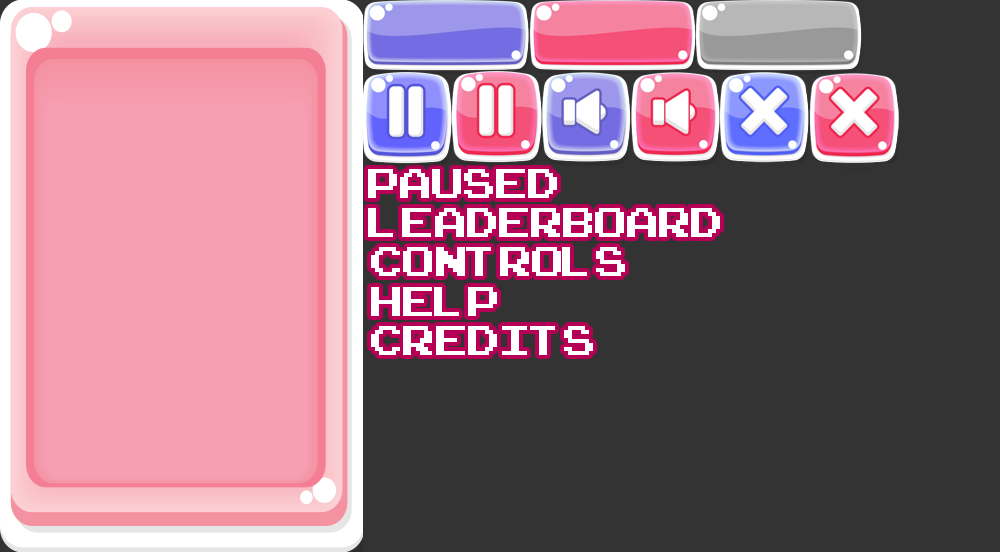
<style>
.page{position:relative;width:1000px;height:552px;background:#333333}
.page>*{position:absolute;margin:0}
.t1{font:58.3px "ArcadeClassic";color:#ffffff}
</style>
<div class="page">
<p class="t1" style="left:368px;top:169px;width:189px;height:29px">paused</p>
<p class="t1" style="left:368px;top:208px;width:352px;height:29px">leaderboard</p>
<p class="t1" style="left:371px;top:247px;width:254px;height:29px">Controls</p>
<p class="t1" style="left:371px;top:287px;width:126px;height:29px">help</p>
<p class="t1" style="left:371px;top:326px;width:222px;height:29px">credits</p>
</div>
